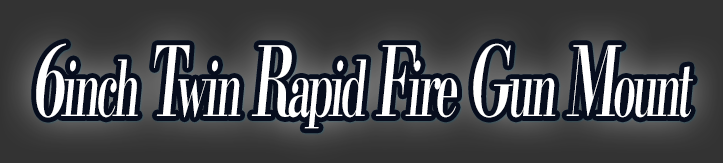
<style>
.page{position:relative;width:723px;height:163px}
.page>*{position:absolute;margin:0}
.t1{font:76.8px "KochoStd-Heavy";letter-spacing:-0.08em;color:#ffffff;font-style:italic;scale:0.55 1}
.t2{font:96px "KochoStd-Heavy";letter-spacing:-0.08em;color:#ffffff;font-style:italic;scale:0.55 1}
</style>
<div class="page">
<p class="t1" style="left:36px;top:43px;width:657px;height:86px"><span class="t2">6</span>inch<span class="t2"> T</span>win<span class="t2"> R</span>apid<span class="t2"> F</span>ire<span class="t2"> G</span>un<span class="t2"> M</span>ount</p>
</div>
